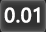
<style>
.page{position:relative;width:46px;height:32px;background:#313131}
.page>*{position:absolute;margin:0}
.t1{font:18.7px "MicrosoftYaHeiUI";color:#fffefe;font-weight:bold}
</style>
<div class="page">
<p class="t1" style="left:4px;top:7px;width:36px;height:16px">0.01</p>
</div>
